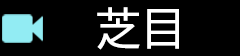
<style>
.page{position:relative;width:240px;height:56px;background:#000000}
.page>*{position:absolute;margin:0}
.t1{font:44.8px "BIZ-UDPGothic";color:#ffffff}
</style>
<div class="page">
<p class="t1" style="left:97px;top:7px;width:82px;height:43px">芝目</p>
</div>
